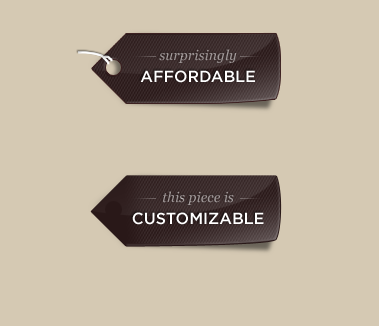
<style>
.page{position:relative;width:379px;height:326px;background:#d5c9b3}
.page>*{position:absolute;margin:0}
.t1{font:14px "Georgia-Italic";color:#9f9898}
.t2{font:16px "Gotham-Medium";color:#ffffff;text-transform:uppercase}
.t3{font:14px "Georgia-Italic";color:#9f9797}
</style>
<div class="page">
<p class="t1" style="left:159px;top:49px;width:78px;height:14px">surprisingly</p>
<p class="t2" style="left:140px;top:70px;width:115px;height:13px">Affordable</p>
<p class="t3" style="left:163px;top:191px;width:71px;height:14px">this piece is</p>
<p class="t2" style="left:132px;top:212px;width:132px;height:13px">customizable</p>
</div>
